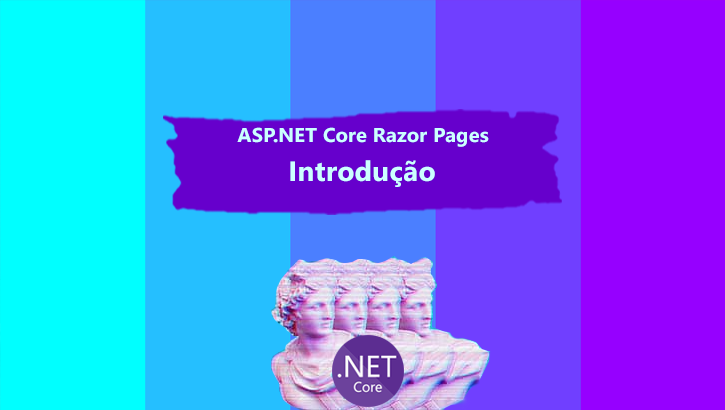
<style>
.page{position:relative;width:725px;height:410px;background:#9600ff}
.page>*{position:absolute;margin:0}
.t1{font:20px "SegoeUI-Bold";letter-spacing:0.01em;color:#ccffff}
.t2{font:28px "SegoeUI-Bold";letter-spacing:0.01em;color:#ccffff}
</style>
<div class="page">
<p class="t1" style="left:237px;top:127px;width:252px;height:20px">ASP.NET Core Razor Pages</p>
<p class="t2" style="left:290px;top:160px;width:145px;height:27px">Introdução</p>
</div>
